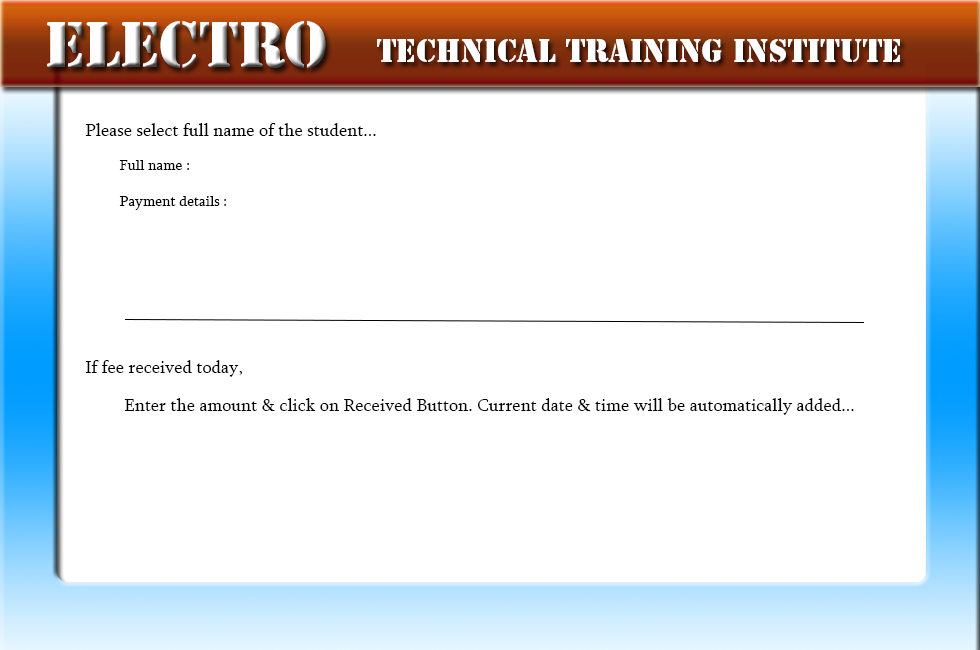
<style>
.page{position:relative;width:980px;height:650px;background:#ffffff}
.page>*{position:absolute;margin:0}
.t1{font:60px "StencilStd";color:#ffffff}
.t2{font:30px "StencilStd";color:#ffffff}
.t3{font:18px "Sylfaen";color:#000000}
.t4{font:15px "Sylfaen";color:#000000}
</style>
<div class="page">
<p class="t1" style="left:47px;top:21px;width:279px;height:47px">Electro</p>
<p class="t2" style="left:377px;top:39px;width:523px;height:23px">Technical Training Institute</p>
<p class="t3" style="left:85px;top:123px;width:291px;height:13px">Please select full name of the student...</p>
<p class="t4" style="left:119px;top:160px;width:108px;height:50px">Full name :<br><br>Payment details :</p>
<p class="t3" style="left:85px;top:360px;width:158px;height:17px">If fee received today,</p>
<p class="t3" style="left:124px;top:398px;width:730px;height:17px">Enter the amount &amp; click on Received Button. Current date &amp; time will be automatically added...</p>
</div>
